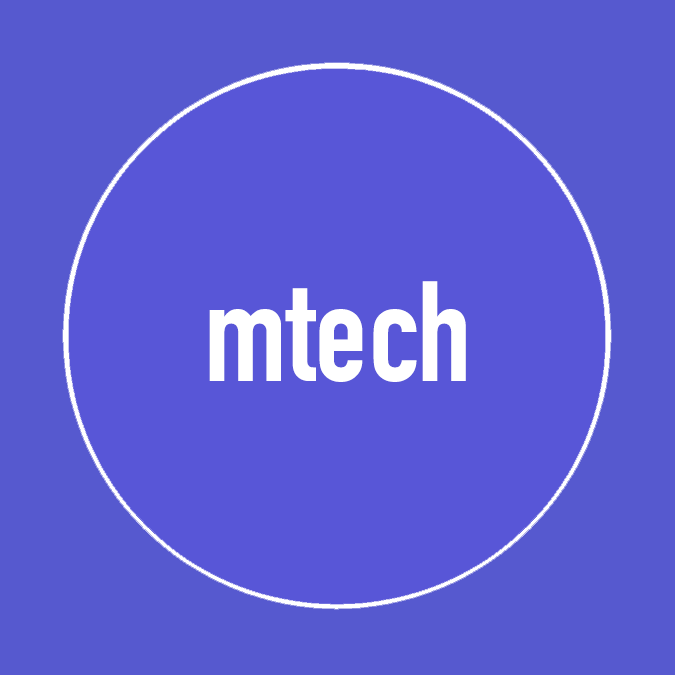
<style>
.page{position:relative;width:675px;height:675px;background:#5659cf}
.page>*{position:absolute;margin:0}
.t1{font:140px "DINCondensed-Bold";color:#ffffff}
</style>
<div class="page">
<p class="t1" style="left:209px;top:281px;width:257px;height:101px">mtech</p>
</div>
